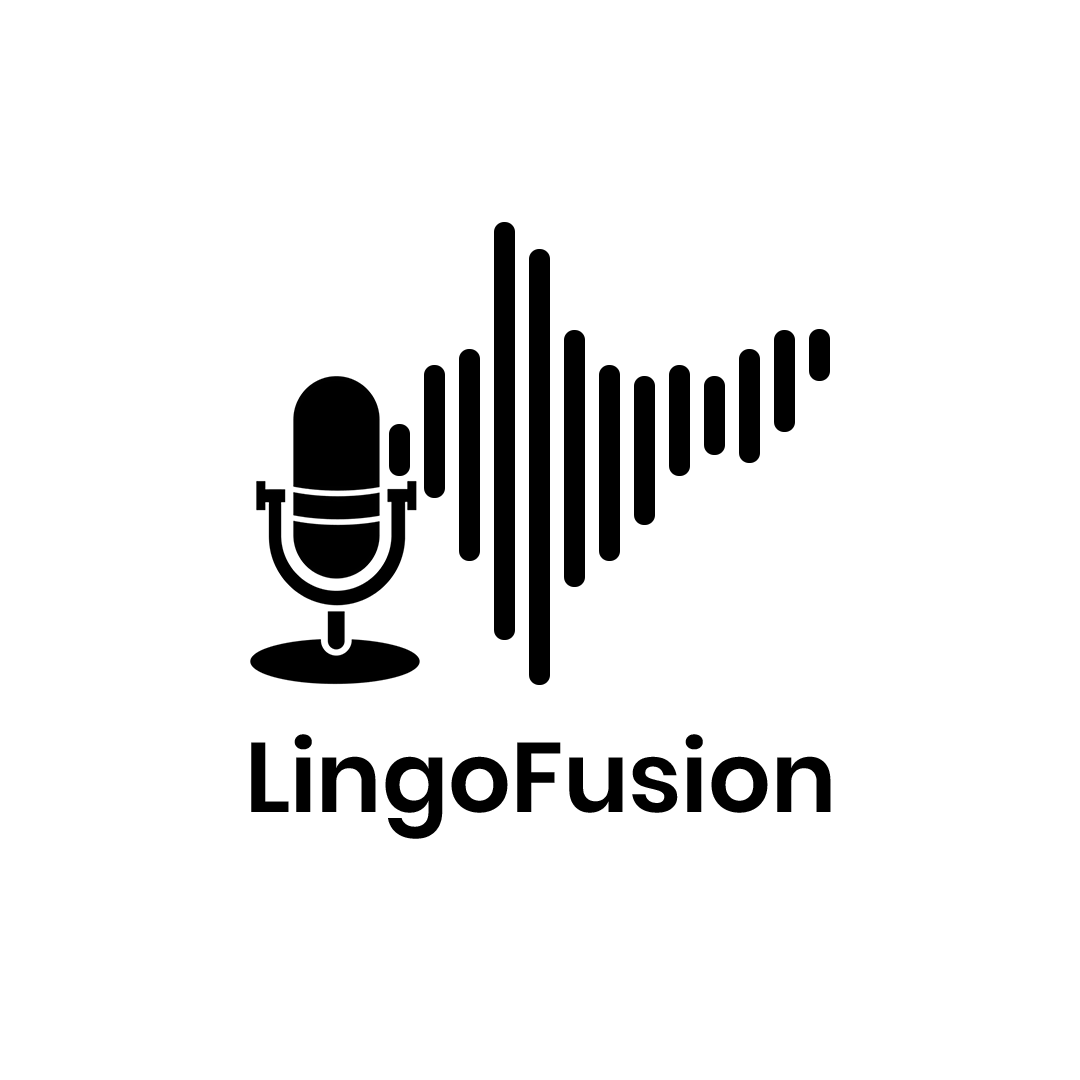
<style>
.page{position:relative;width:1080px;height:1080px;background:#ffffff}
.page>*{position:absolute;margin:0}
.t1{font:98.3px "Poppins-SemiBold";color:#000000}
</style>
<div class="page">
<p class="t1" style="left:251px;top:734px;width:580px;height:105px">LingoFusion</p>
</div>
